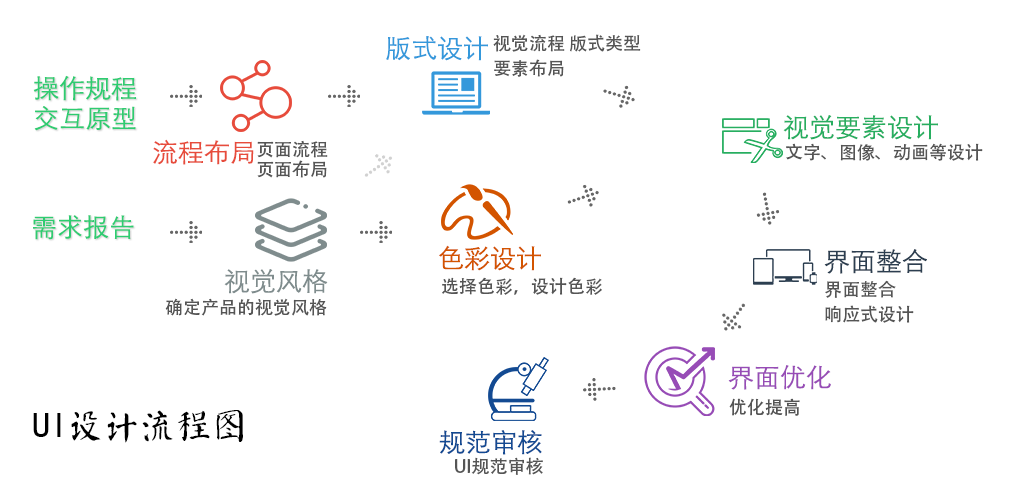
<style>
.page{position:relative;width:1024px;height:496px;background:#ffffff}
.page>*{position:absolute;margin:0}
.t1{font:26px "STXihei";color:#3498db;text-transform:uppercase}
.t2{font:18px/25px "AdobeHeitiStd-Regular";color:#555555;text-transform:uppercase}
.t3{font:26px/30px "STXihei";color:#2ecc71;text-transform:uppercase}
.t4{font:26px "STXihei";color:#27ae60;text-transform:uppercase}
.t5{font:26px "STXihei";color:#e74c3c;text-transform:uppercase}
.t6{font:18px/20px "AdobeHeitiStd-Regular";color:#555555;text-transform:uppercase}
.t7{font:18px "AdobeHeitiStd-Regular";color:#555555;text-transform:uppercase}
.t8{font:26px "STXihei";color:#2ecc71;text-transform:uppercase}
.t9{font:26px "STXihei";color:#d35400;text-transform:uppercase}
.t10{font:26px "STXihei";color:#2c3e50;text-transform:uppercase}
.t11{font:26px "STXihei";color:#7f8c8d;text-transform:uppercase}
.t12{font:26px "STXihei";color:#974cb6;text-transform:uppercase}
.t13{font:36px "øów·»îów©I";color:#000000;text-transform:uppercase}
.t14{font:26px "STXihei";color:#134a92;text-transform:uppercase}
</style>
<div class="page">
<p class="t1" style="left:386px;top:36px;width:102px;height:25px">版式设计</p>
<p class="t2" style="left:493px;top:34px;width:148px;height:43px">视觉流程 版式类型<br>要素布局</p>
<p class="t3" style="left:33px;top:75px;width:103px;height:56px">操作规程<br>交互原型</p>
<p class="t4" style="left:783px;top:115px;width:155px;height:25px">视觉要素设计</p>
<p class="t5" style="left:153px;top:139px;width:101px;height:26px">流程布局</p>
<p class="t6" style="left:257px;top:140px;width:71px;height:38px">页面流程<br>页面布局</p>
<p class="t7" style="left:786px;top:143px;width:197px;height:18px">文字、图像、动画等设计</p>
<p class="t8" style="left:33px;top:215px;width:101px;height:25px">需求报告</p>
<p class="t9" style="left:439px;top:245px;width:102px;height:26px">色彩设计</p>
<p class="t10" style="left:824px;top:249px;width:103px;height:25px">界面整合</p>
<p class="t11" style="left:224px;top:269px;width:104px;height:25px">视觉风格</p>
<p class="t7" style="left:442px;top:277px;width:160px;height:18px">选择色彩，设计色彩</p>
<p class="t2" style="left:825px;top:280px;width:89px;height:43px">界面整合<br>响应式设计</p>
<p class="t7" style="left:165px;top:298px;width:162px;height:18px">确定产品的视觉风格</p>
<p class="t12" style="left:728px;top:365px;width:103px;height:25px">界面优化</p>
<p class="t7" style="left:729px;top:398px;width:71px;height:18px">优化提高</p>
<p class="t13" style="left:33px;top:410px;width:210px;height:33px">UI设计流程图</p>
<p class="t14" style="left:439px;top:430px;width:103px;height:25px">规范审核</p>
<p class="t7" style="left:455px;top:457px;width:88px;height:18px">UI规范审核</p>
</div>
